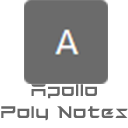
<style>
.page{position:relative;width:128px;height:128px;background:#ffffff}
.page>*{position:absolute;margin:0}
.t1{font:18.7px "TESLA";color:#666666}
</style>
<div class="page">
<p class="t1" style="left:1px;top:84px;width:127px;height:37px;text-align:center">Apollo<br>Poly Notes</p>
</div>
